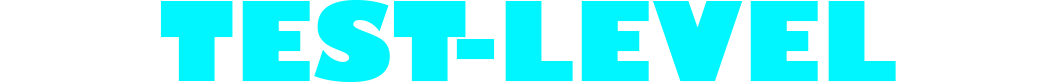
<style>
.page{position:relative;width:1054px;height:82px;background:#ffffff}
.page>*{position:absolute;margin:0}
.t1{font:108.3px "GillSans-UltraBold";color:#00f6ff}
</style>
<div class="page">
<p class="t1" style="left:160px;top:0px;width:736px;height:82px">TEST-LEVEL</p>
</div>
